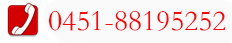
<style>
.page{position:relative;width:232px;height:43px;background:#fbfafb}
.page>*{position:absolute;margin:0}
.t1{font:30px "STSong";color:#f00c0c}
</style>
<div class="page">
<p class="t1" style="left:48px;top:10px;width:178px;height:21px">0451-88195252</p>
</div>
